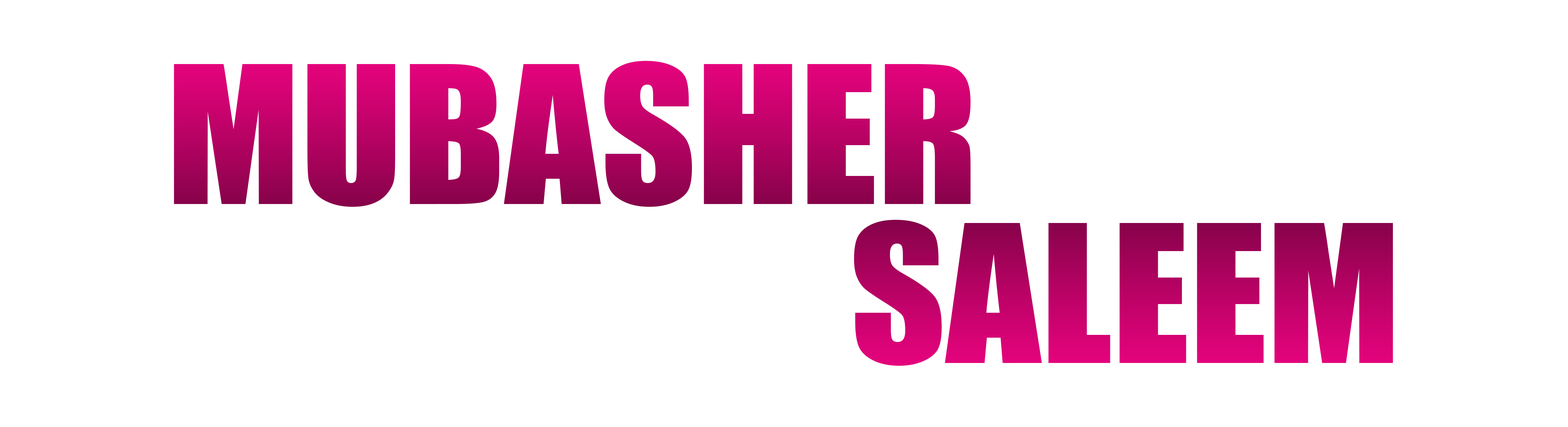
<style>
.page{position:relative;width:1568px;height:427px;background:#ffffff}
.page>*{position:absolute;margin:0}
.t1{font:177.2px "Impact";scale:1.05 1}
</style>
<div class="page">
<p class="t1" style="left:174px;top:61px;width:797px;height:146px">MUBASHER</p>
<p class="t1" style="left:854px;top:220px;width:539px;height:146px">SALEEM</p>
</div>
